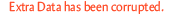
<style>
.page{position:relative;width:174px;height:14px;background:#ffffff}
.page>*{position:absolute;margin:0}
.t1{font:13.2px "Amira-Roman";color:#fe4d2a;scale:0.91 1}
</style>
<div class="page">
<p class="t1" style="left:9px;top:1px;width:155px;height:13px">Extra Data has been corrupted.</p>
</div>
